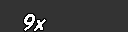
<style>
.page{position:relative;width:128px;height:32px;background:#333333}
.page>*{position:absolute;margin:0}
.t1{font:26px "DomDiagonalBT-Regular";color:#ffffff;scale:1.1 1}
</style>
<div class="page">
<p class="t1" style="left:24px;top:14px;width:22px;height:17px">9x</p>
</div>
